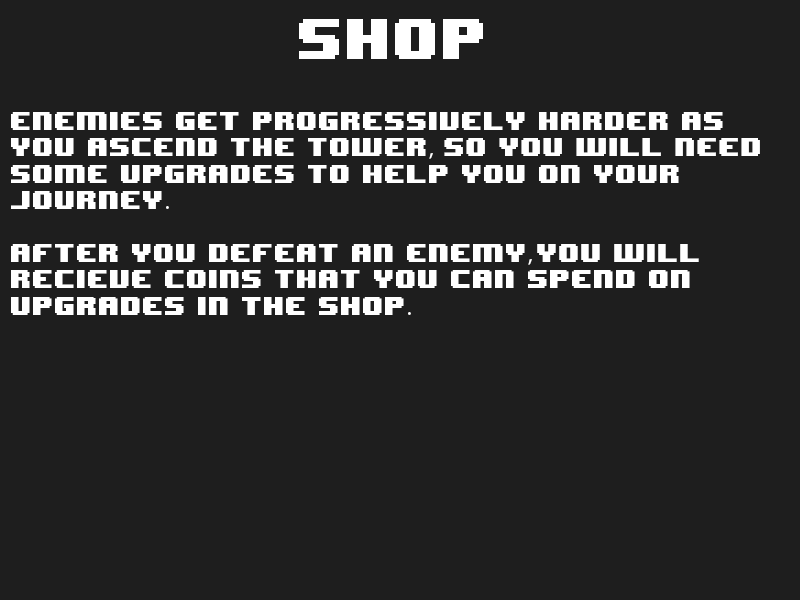
<style>
.page{position:relative;width:800px;height:600px;background:#1e1e1e}
.page>*{position:absolute;margin:0}
.t1{font:48px "8BITWONDERNominal";color:#ffffff}
.t2{font:22px "8BITWONDERNominal";color:#ffffff}
.t3{font:22px "MyriadPro-Regular";color:#ffffff}
</style>
<div class="page">
<p class="t1" style="left:299px;top:19px;width:184px;height:40px">shop</p>
<p class="t2" style="left:11px;top:112px;width:749px;height:203px">enemies get progressively harder as<br>you ascend the tower<span class="t3">,</span> so you will need<br>some upgrades to help you on your<br>journey<span class="t3">.<br><br></span>after you defeat an enemy<span class="t3">, </span>you will<br>recieve coins that you CAN SPEND ON<br>UPGRADES IN THE SHOP<span class="t3">.</span></p>
</div>
